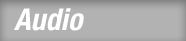
<style>
.page{position:relative;width:186px;height:41px;background:#b2b2b2}
.page>*{position:absolute;margin:0}
.t1{font:30px "HelveticaNeueLTPro-BdCnO";color:#ffffff}
</style>
<div class="page">
<p class="t1" style="left:14px;top:8px;width:70px;height:23px">Audio</p>
</div>
